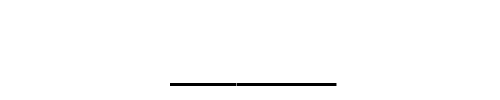
<style>
.page{position:relative;width:500px;height:100px;background:#ffffff}
.page>*{position:absolute;margin:0}
.t1{font:66.7px "Pristina-Regular";color:#000000}
</style>
<div class="page">
<p class="t1" style="left:170px;top:83px;width:167px;height:3px">_____</p>
</div>
